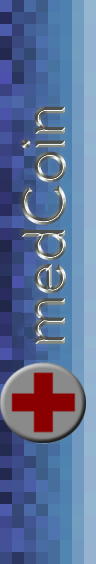
<style>
.page{position:relative;width:96px;height:564px}
.page>*{position:absolute;margin:0}
.t1{font:60px "ProductSans-Medium"}
</style>
<div class="page">
<p class="t1" style="left:21px;top:106px;width:45px;height:238px;rotate:-90deg">medCoin</p>
</div>
